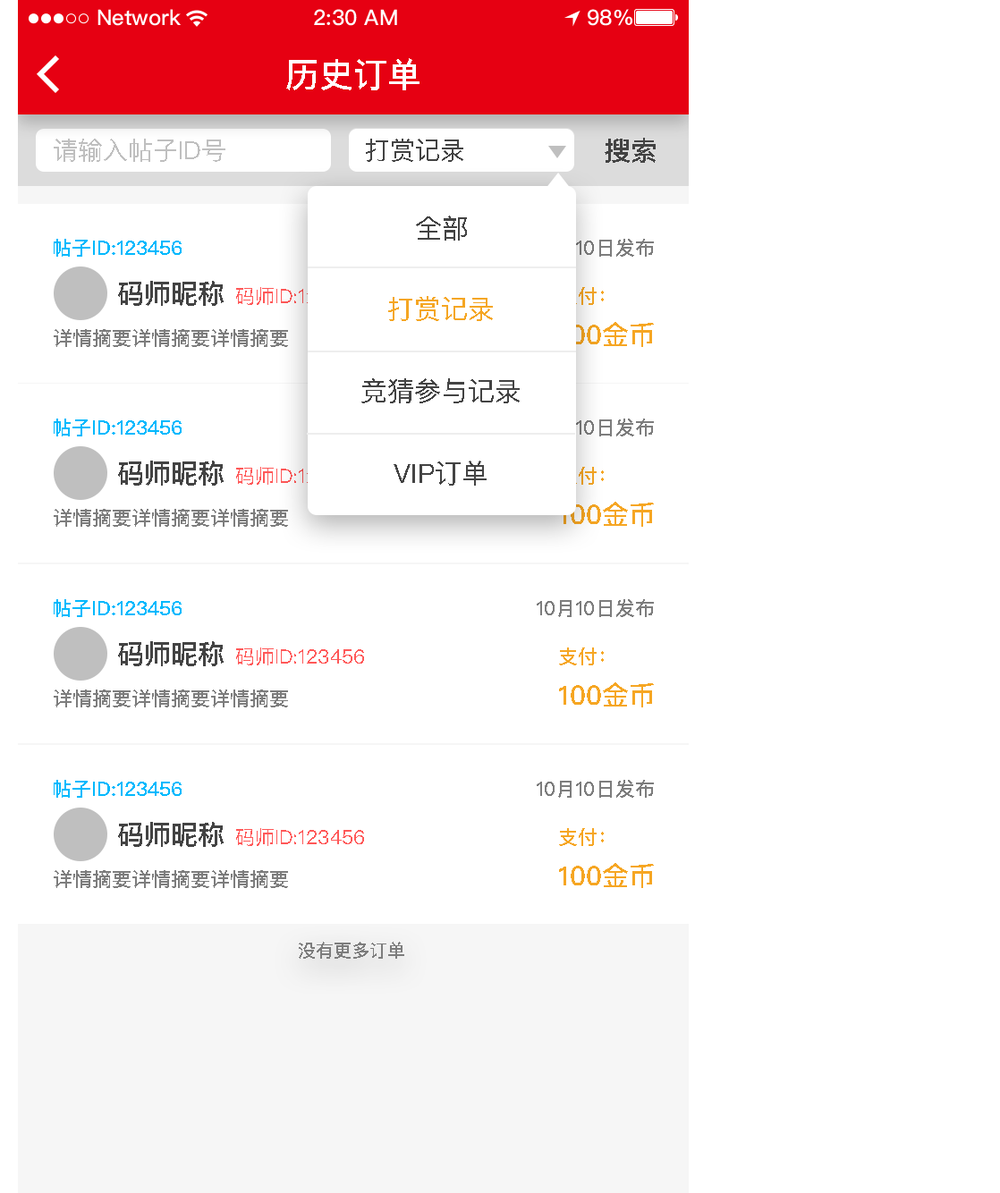
<style>
.page{position:relative;width:1000px;height:1193px;background:#ffffff}
.page>*{position:absolute;margin:0}
.t1{font:34px "PingFangSC-Medium";color:#ffffff;text-transform:uppercase}
.t2{font:26.8px "PingFangSC-Medium";color:#434343;text-transform:uppercase}
.t3{font:25px "PingFangSC-Regular";color:#bfbfbf;text-transform:uppercase}
.t4{font:25px "PingFangSC-Regular";color:#434343;text-transform:uppercase}
.t5{font:26.8px "PingFangSC-Regular";color:#434343;text-transform:uppercase}
.t6{font:19.7px "PingFangSC-Medium";color:#01b9fd;text-transform:uppercase}
.t7{font:19.7px "PingFangSC-Medium";color:#7d7d7d;text-transform:uppercase}
.t8{font:19.7px "PingFangSC-Regular";text-transform:uppercase}
.t9{font:19.7px "PingFangSC-Medium";text-transform:uppercase}
.t10{font:26.8px "PingFangSC-Regular";color:#f5a623;text-transform:uppercase}
.t11{font:26.8px "PingFangSC-Medium";color:#f6a623;text-transform:uppercase}
.t12{font:19.7px "PingFangSC-Regular";color:#ff5858;text-transform:uppercase}
.t13{font:19.7px "PingFangSC-Medium";color:#f6a623;text-transform:uppercase}
.t14{font:17.9px "PingFangSC-Medium";color:#7d7d7d;text-transform:uppercase}
</style>
<div class="page">
<p class="t1" style="left:286px;top:58px;width:133px;height:32px">历史订单</p>
<p class="t2" style="left:604px;top:138px;width:51px;height:25px">搜索</p>
<p class="t3" style="left:54px;top:139px;width:171px;height:23px">请输入帖子id号</p>
<p class="t4" style="left:366px;top:139px;width:97px;height:23px">打赏记录</p>
<p class="t5" style="left:416px;top:215px;width:51px;height:26px">全部</p>
<p class="t6" style="left:54px;top:239px;width:128px;height:18px">帖子id:123456</p>
<p class="t7" style="left:536px;top:239px;width:118px;height:18px">10月10日发布</p>
<p class="t2" style="left:118px;top:281px;width:106px;height:25px">码师昵称</p>
<p class="t8" style="left:236px;top:287px;width:128px;height:18px">码师id:123456</p>
<p class="t9" style="left:559px;top:287px;width:45px;height:18px">支付：</p>
<p class="t10" style="left:388px;top:296px;width:105px;height:25px">打赏记录</p>
<p class="t7" style="left:54px;top:329px;width:234px;height:18px">详情摘要详情摘要详情摘要</p>
<p class="t11" style="left:559px;top:322px;width:95px;height:25px">100金币</p>
<p class="t5" style="left:361px;top:378px;width:159px;height:25px">竞猜参与记录</p>
<p class="t6" style="left:54px;top:418px;width:128px;height:18px">帖子id:123456</p>
<p class="t7" style="left:536px;top:418px;width:118px;height:18px">10月10日发布</p>
<p class="t2" style="left:118px;top:460px;width:106px;height:26px">码师昵称</p>
<p class="t5" style="left:393px;top:460px;width:93px;height:26px">VIP订单</p>
<p class="t8" style="left:236px;top:467px;width:128px;height:18px">码师id:123456</p>
<p class="t9" style="left:559px;top:467px;width:45px;height:18px">支付：</p>
<p class="t7" style="left:54px;top:509px;width:234px;height:18px">详情摘要详情摘要详情摘要</p>
<p class="t11" style="left:559px;top:502px;width:95px;height:25px">100金币</p>
<p class="t6" style="left:54px;top:599px;width:128px;height:18px">帖子id:123456</p>
<p class="t7" style="left:536px;top:599px;width:118px;height:18px">10月10日发布</p>
<p class="t2" style="left:118px;top:641px;width:106px;height:25px">码师昵称</p>
<p class="t12" style="left:236px;top:647px;width:128px;height:18px">码师id:123456</p>
<p class="t13" style="left:559px;top:647px;width:45px;height:18px">支付：</p>
<p class="t7" style="left:54px;top:689px;width:234px;height:18px">详情摘要详情摘要详情摘要</p>
<p class="t11" style="left:559px;top:682px;width:95px;height:25px">100金币</p>
<p class="t6" style="left:54px;top:780px;width:128px;height:18px">帖子id:123456</p>
<p class="t7" style="left:536px;top:780px;width:118px;height:18px">10月10日发布</p>
<p class="t2" style="left:118px;top:822px;width:106px;height:25px">码师昵称</p>
<p class="t12" style="left:236px;top:828px;width:128px;height:18px">码师id:123456</p>
<p class="t13" style="left:559px;top:828px;width:45px;height:18px">支付：</p>
<p class="t11" style="left:559px;top:863px;width:95px;height:25px">100金币</p>
<p class="t7" style="left:54px;top:870px;width:234px;height:18px">详情摘要详情摘要详情摘要</p>
<p class="t14" style="left:299px;top:942px;width:105px;height:17px">没有更多订单</p>
</div>
